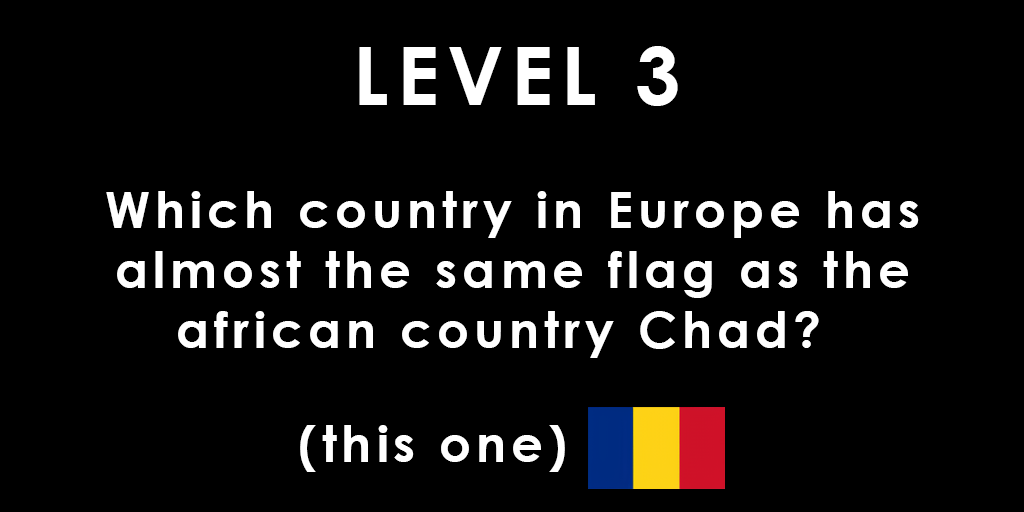
<style>
.page{position:relative;width:1024px;height:512px;background:#000000}
.page>*{position:absolute;margin:0}
.t1{font:80.6px "CenturyGothic-Bold";letter-spacing:0.1em;color:#ffffff}
.t2{font:50px "CenturyGothic-Bold";letter-spacing:0.1em;color:#ffffff}
</style>
<div class="page">
<p class="t1" style="left:359px;top:46px;width:319px;height:60px">LEVEL 3</p>
<p class="t2" style="left:106px;top:191px;width:813px;height:167px;text-align:center">Which country in Europe has<br>almost the same flag as the<br>african country Chad?</p>
<p class="t2" style="left:300px;top:425px;width:265px;height:47px">(this one)</p>
</div>
